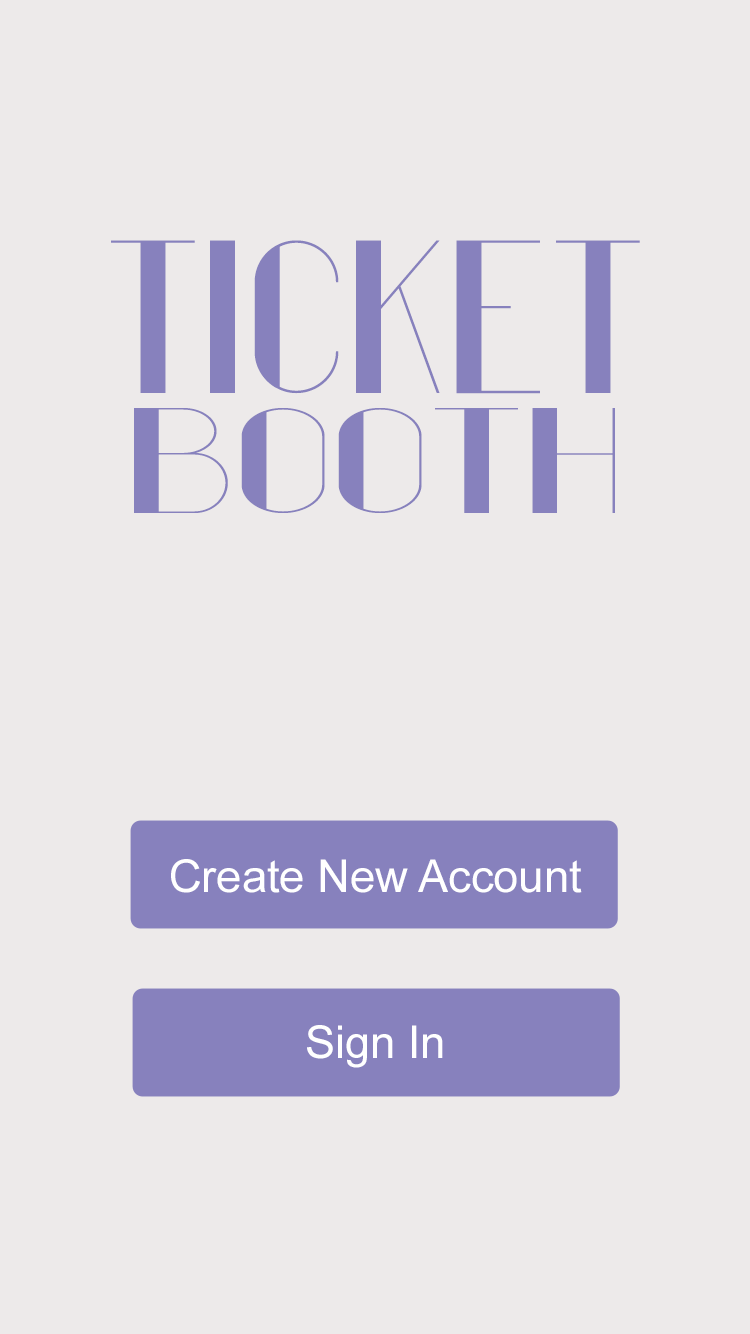
<style>
.page{position:relative;width:750px;height:1334px;background:#edeaea}
.page>*{position:absolute;margin:0}
.t1{font:276.8px "FiftyFive";color:#8781bd}
.t2{font:190.6px "FiftyFive";color:#8781bd;scale:1.44 1}
.t3{font:45.3px "ArialMT";color:#ffffff}
</style>
<div class="page">
<p class="t1" style="left:111px;top:240px;width:529px;height:154px">Ticket</p>
<p class="t2" style="left:134px;top:408px;width:481px;height:105px">Booth</p>
<p class="t3" style="left:171px;top:859px;width:411px;height:34px">Create New Account</p>
<p class="t3" style="left:307px;top:1025px;width:136px;height:43px">Sign In</p>
</div>
